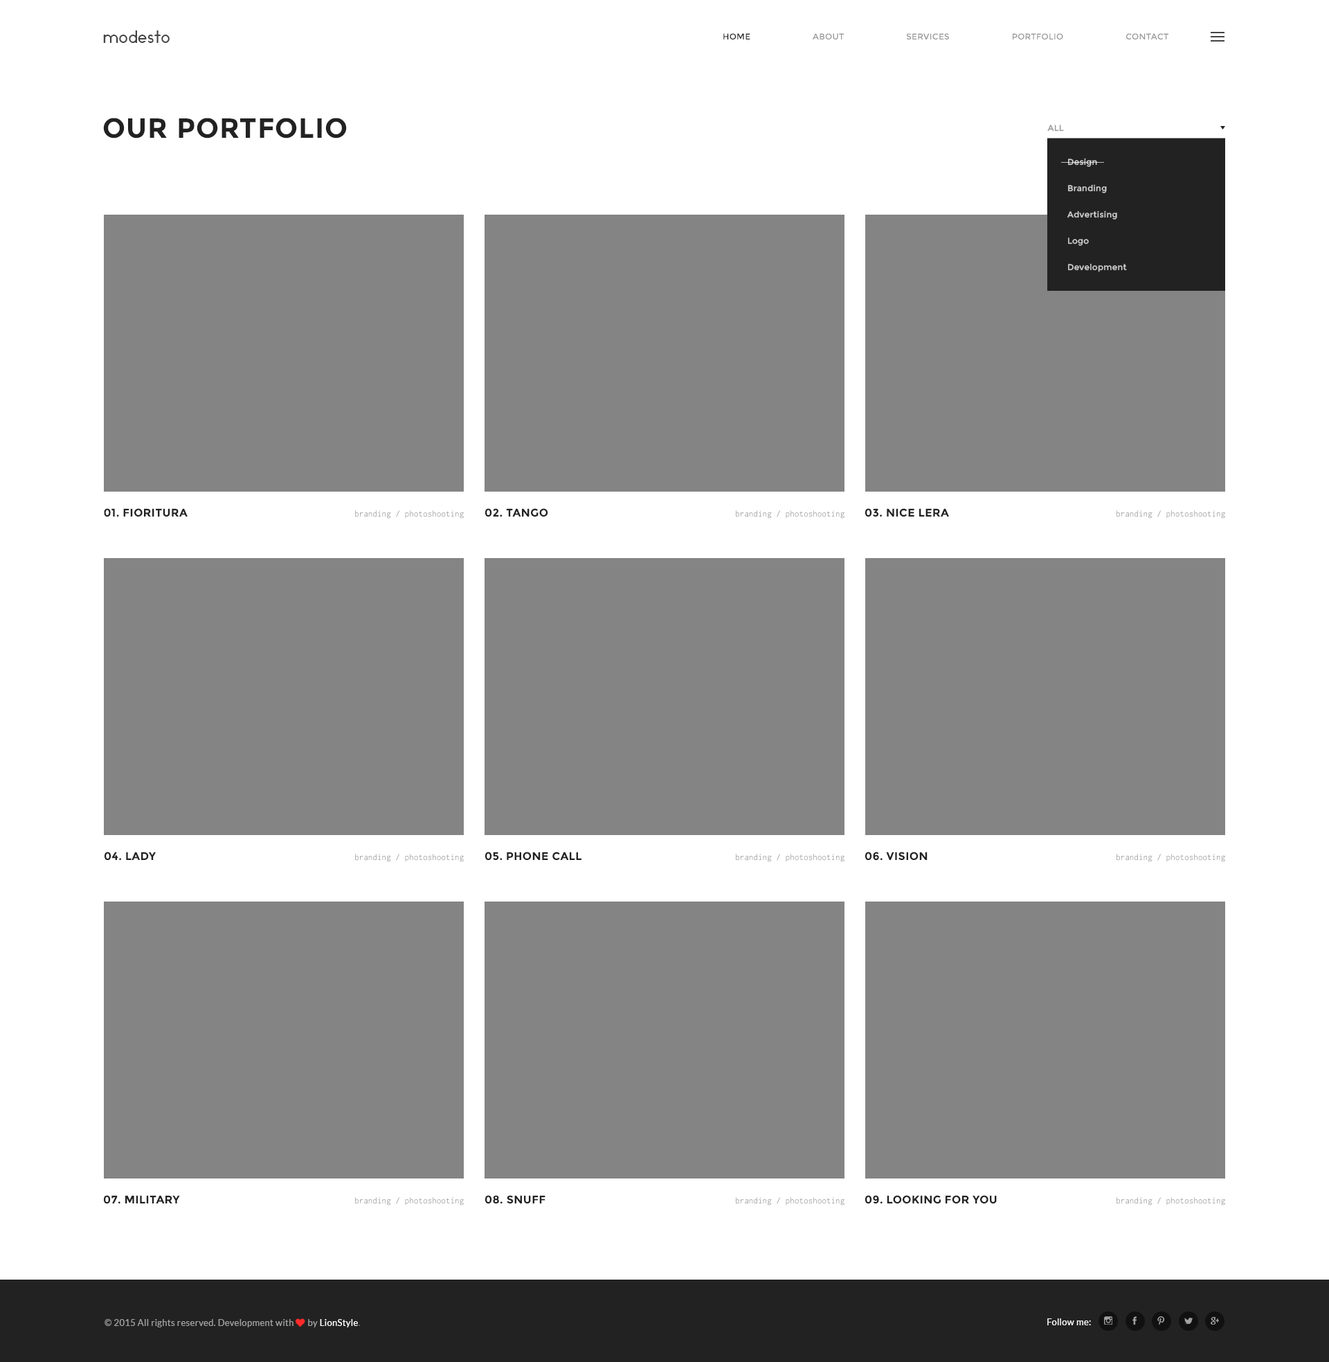
<style>
.page{position:relative;width:1329px;height:1362px;background:#848484}
.page>*{position:absolute;margin:0}
.t1{font:16.6px "Ikaros";letter-spacing:0.025em;color:#444444}
.t2{font:8.3px "Montserrat-Regular";letter-spacing:0.025em;color:#989898;text-transform:uppercase}
.t3{font:8.3px "Montserrat-Regular";letter-spacing:0.025em;color:#222222;text-transform:uppercase}
.t4{font:27.7px "Montserrat-Bold";letter-spacing:0.025em;color:#222222;text-transform:uppercase}
.t5{font:8.3px/26.3px "Montserrat-Regular";letter-spacing:0.025em;color:#cecece}
.t6{font:11.1px "Montserrat-Bold";letter-spacing:0.025em;color:#222222;text-transform:uppercase}
.t7{font:9px "Inconsolata";letter-spacing:0.025em;color:#989898;scale:0.97 1}
.t8{font:9px "Lato-Regular";letter-spacing:0.025em;color:#a1a1a1}
.t9{font:9px "FontAwesome";letter-spacing:0.025em;color:#fe2b2b}
.t10{font:9px "Lato-Regular";letter-spacing:0.025em;color:#ffffff}
.t11{font:9px "Lato-Regular";letter-spacing:0.025em;color:#696969}
.t12{font:9px "Lato-Regular";letter-spacing:0.025em;color:#fefefe}
</style>
<div class="page">
<p class="t1" style="left:103px;top:30px;width:67px;height:13px">modesto</p>
<p class="t2" style="left:723px;top:33px;width:446px;height:6px"><span class="t3">home                         </span>about                         services                         portfolio                         contact</p>
<p class="t4" style="left:103px;top:118px;width:244px;height:20px">our portfolio</p>
<p class="t2" style="left:1047px;top:125px;width:17px;height:7px">all</p>
<p class="t5" style="left:1068px;top:158px;width:59px;height:114px">Design   <br>Branding<br>Advertising<br>Logo<br>Development</p>
<p class="t6" style="left:104px;top:508px;width:84px;height:9px">01. Fioritura</p>
<p class="t6" style="left:485px;top:508px;width:63px;height:9px">02. tango</p>
<p class="t6" style="left:865px;top:508px;width:84px;height:9px">03. nice lera</p>
<p class="t7" style="left:355px;top:510px;width:109px;height:9px">branding / photoshooting</p>
<p class="t7" style="left:736px;top:510px;width:109px;height:9px">branding / photoshooting</p>
<p class="t7" style="left:1117px;top:510px;width:108px;height:9px">branding / photoshooting</p>
<p class="t6" style="left:105px;top:852px;width:51px;height:9px">04. lady</p>
<p class="t7" style="left:355px;top:854px;width:109px;height:8px">branding / photoshooting</p>
<p class="t6" style="left:485px;top:852px;width:97px;height:9px">05. phone call</p>
<p class="t7" style="left:736px;top:854px;width:109px;height:8px">branding / photoshooting</p>
<p class="t6" style="left:865px;top:852px;width:63px;height:9px">06. Vision</p>
<p class="t7" style="left:1117px;top:854px;width:108px;height:8px">branding / photoshooting</p>
<p class="t6" style="left:104px;top:1195px;width:76px;height:9px">07. military</p>
<p class="t7" style="left:355px;top:1197px;width:109px;height:8px">branding / photoshooting</p>
<p class="t6" style="left:485px;top:1195px;width:61px;height:9px">08. snuff</p>
<p class="t7" style="left:736px;top:1197px;width:109px;height:8px">branding / photoshooting</p>
<p class="t6" style="left:865px;top:1195px;width:132px;height:9px">09. looking for you</p>
<p class="t7" style="left:1117px;top:1197px;width:108px;height:8px">branding / photoshooting</p>
<p class="t8" style="left:105px;top:1318px;width:255px;height:9px">© 2015 All rights reserved. Development with <span class="t9">♥ </span>by <span class="t10">LionStyle</span><span class="t11">.</span></p>
<p class="t12" style="left:1047px;top:1318px;width:44px;height:7px">Follow me:</p>
</div>
